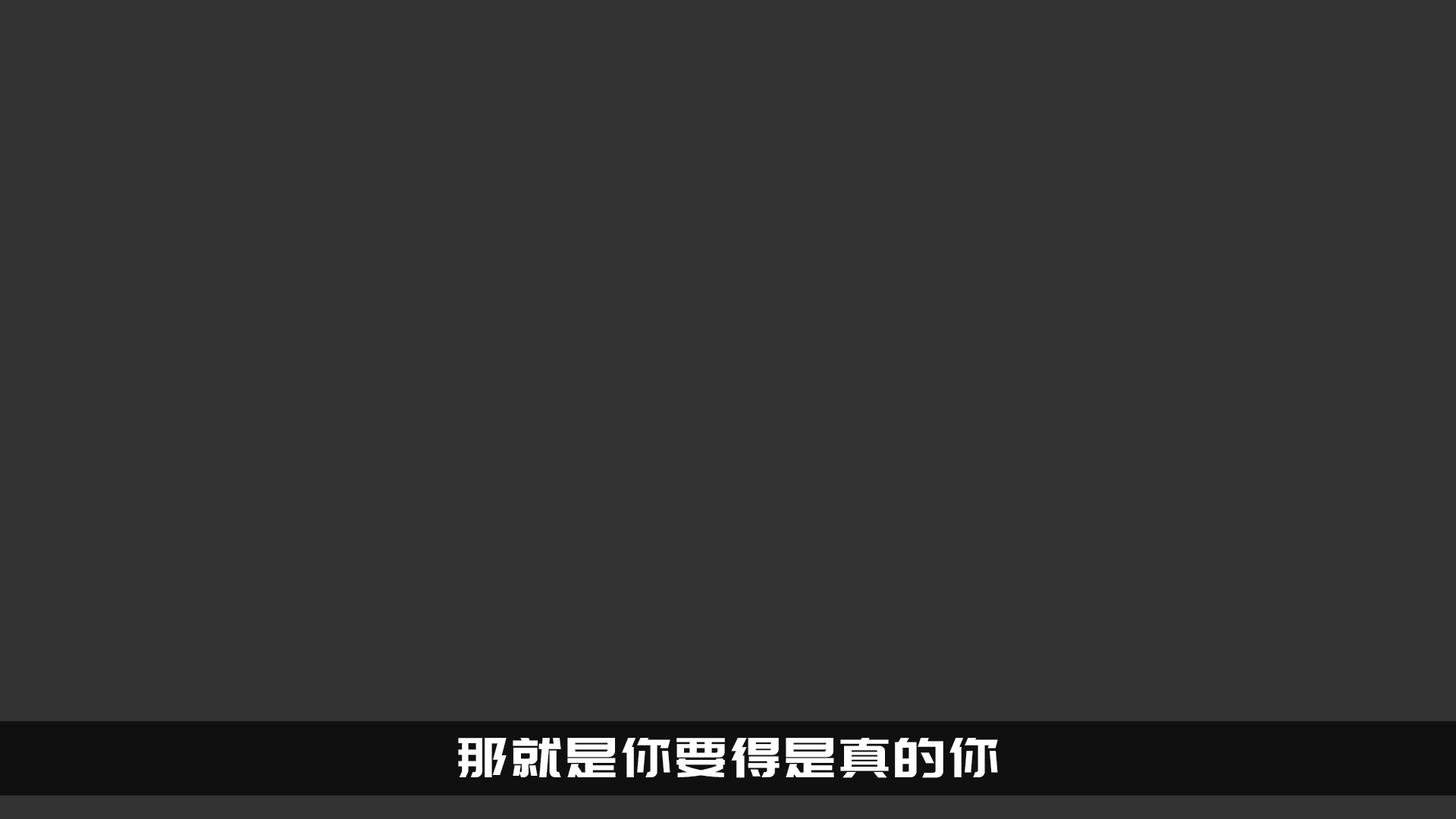
<style>
.page{position:relative;width:1456px;height:819px;background:#333333}
.page>*{position:absolute;margin:0}
.t1{font:54.6px "PangMenZhengDao-3";color:#ffffff}
</style>
<div class="page">
<p class="t1" style="left:458px;top:738px;width:540px;height:40px">那就是你要得是真的你</p>
</div>
